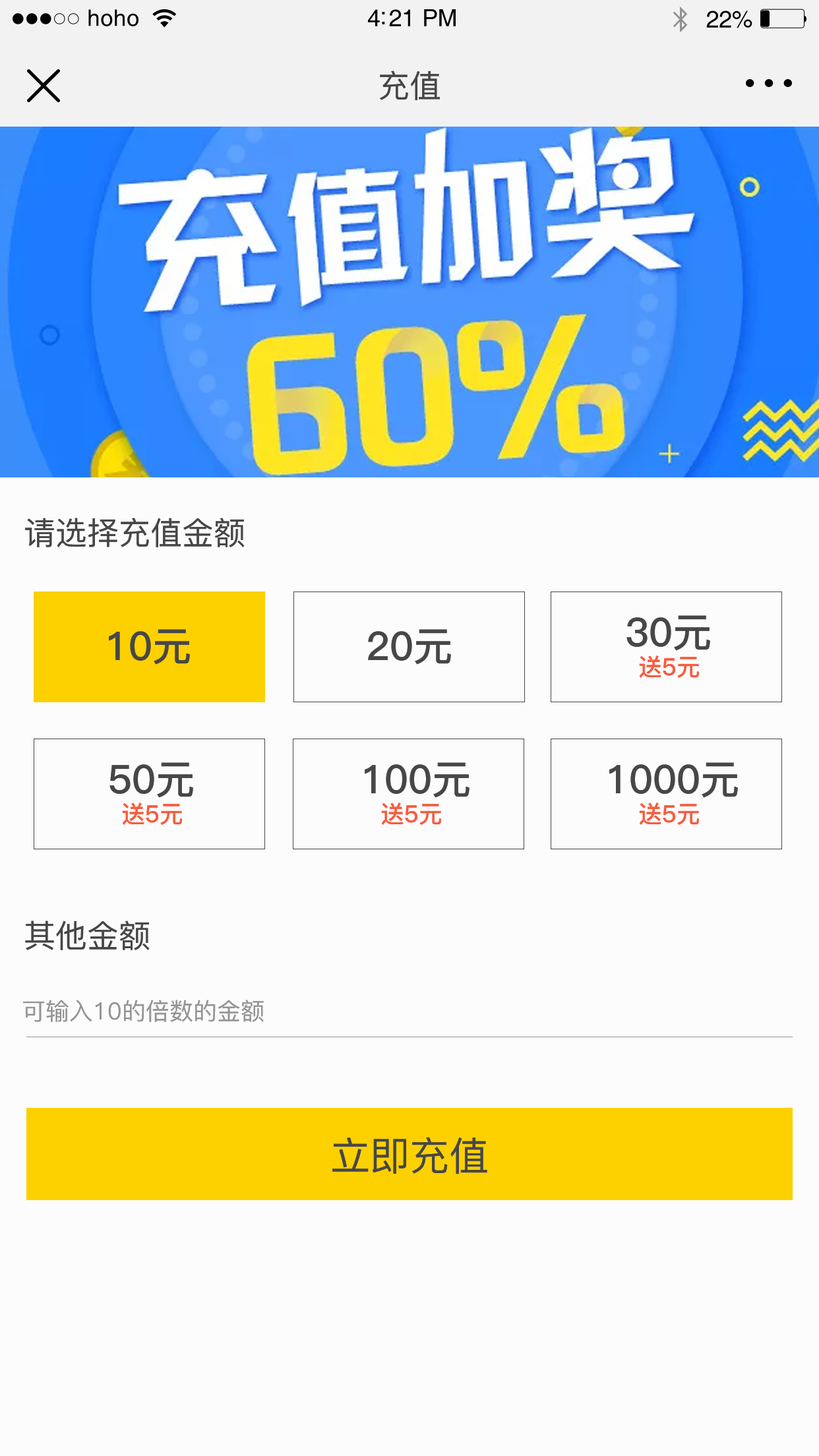
<style>
.page{position:relative;width:819px;height:1456px;background:#fdfcfd}
.page>*{position:absolute;margin:0}
.t1{font:22.8px "Helvetica";letter-spacing:0.02em;color:#000000}
.t2{font:23.8px "Helvetica";letter-spacing:-0.02em;color:#000000}
.t3{font:31.7px "PingFang-SC-Medium";color:#474747}
.t4{font:39.6px "PingFang-SC-Bold";color:#474747}
.t5{font:23.7px "PingFang-SC-Bold";color:#f75c3e}
.t6{font:23.7px "PingFang-SC-Medium";color:#959595}
.t7{font:39.6px "PingFang-SC-Medium";color:#474747}
</style>
<div class="page">
<p class="t1" style="left:88px;top:9px;width:50px;height:17px">hoho</p>
<p class="t2" style="left:368px;top:9px;width:88px;height:17px">4:21 PM</p>
<p class="t2" style="left:706px;top:11px;width:46px;height:17px">22%</p>
<p class="t3" style="left:380px;top:71px;width:60px;height:29px">充值</p>
<p class="t3" style="left:25px;top:518px;width:220px;height:29px">请选择充值金额</p>
<p class="t4" style="left:626px;top:615px;width:84px;height:36px">30元</p>
<p class="t4" style="left:109px;top:629px;width:81px;height:36px">10元</p>
<p class="t4" style="left:368px;top:629px;width:83px;height:36px">20元</p>
<p class="t5" style="left:639px;top:655px;width:60px;height:23px">送5元</p>
<p class="t4" style="left:109px;top:762px;width:84px;height:36px">50元</p>
<p class="t4" style="left:365px;top:762px;width:105px;height:36px">100元</p>
<p class="t4" style="left:609px;top:762px;width:129px;height:36px">1000元</p>
<p class="t5" style="left:122px;top:803px;width:60px;height:22px">送5元</p>
<p class="t5" style="left:381px;top:803px;width:60px;height:22px">送5元</p>
<p class="t5" style="left:639px;top:803px;width:60px;height:22px">送5元</p>
<p class="t3" style="left:25px;top:921px;width:125px;height:29px">其他金额</p>
<p class="t6" style="left:23px;top:1000px;width:241px;height:22px">可输入10的倍数的金额</p>
<p class="t7" style="left:332px;top:1137px;width:155px;height:37px">立即充值</p>
</div>
